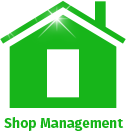
<style>
.page{position:relative;width:126px;height:132px;background:#ffffff}
.page>*{position:absolute;margin:0}
.t1{font:14px "FiraSansOT-Bold";color:#17b51a}
</style>
<div class="page">
<p class="t1" style="left:4px;top:117px;width:120px;height:14px">Shop Management</p>
</div>
